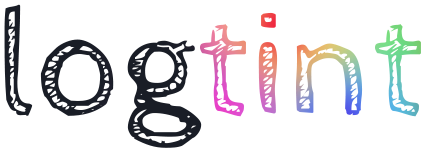
<style>
.page{position:relative;width:425px;height:152px;background:#ffffff}
.page>*{position:absolute;margin:0}
.t1{font:148px "CabinSketch-Regular"}
</style>
<div class="page">
<p class="t1" style="left:4px;top:4px;width:417px;height:144px">logtint</p>
</div>
